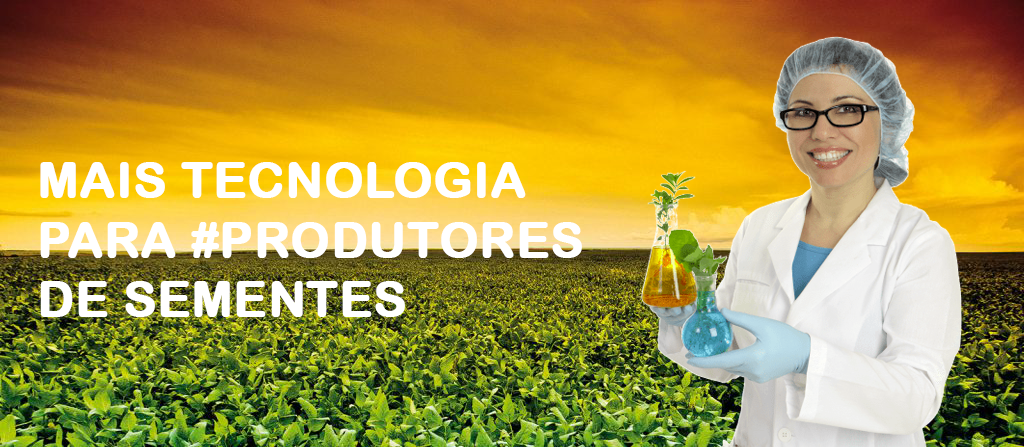
<style>
.page{position:relative;width:1024px;height:447px}
.page>*{position:absolute;margin:0}
.t1{font:49.4px "ArialRoundedMTBold";color:#ffffff;font-weight:bold}
</style>
<div class="page">
<p class="t1" style="left:40px;top:162px;width:542px;height:155px">MAIS TECNOLOGIA<br>PARA #PRODUTORES<br>DE SEMENTES</p>
</div>
